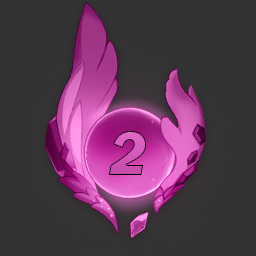
<style>
.page{position:relative;width:256px;height:256px;background:#333333}
.page>*{position:absolute;margin:0}
.t1{font:64.8px "FranklinGothic-HeavyItalic";letter-spacing:0.002em;color:#cc52b1}
</style>
<div class="page">
<p class="t1" style="left:108px;top:131px;width:38px;height:44px">2</p>
</div>
